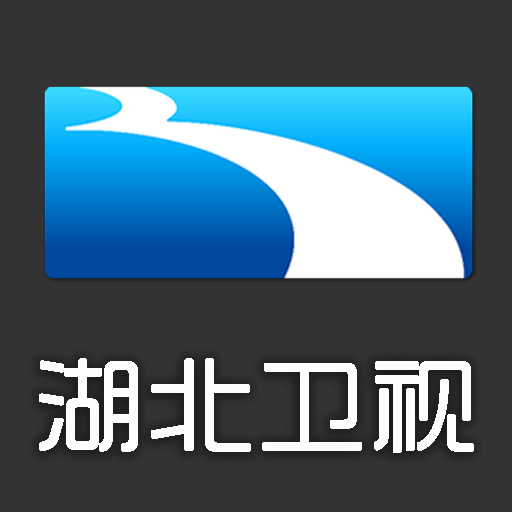
<style>
.page{position:relative;width:512px;height:512px;background:#333333}
.page>*{position:absolute;margin:0}
.t1{font:106.7px "SJshishang-Regular";letter-spacing:0.02em;color:#fcfdfd;font-weight:bold}
</style>
<div class="page">
<p class="t1" style="left:39px;top:358px;width:435px;height:95px">湖北卫视</p>
</div>
